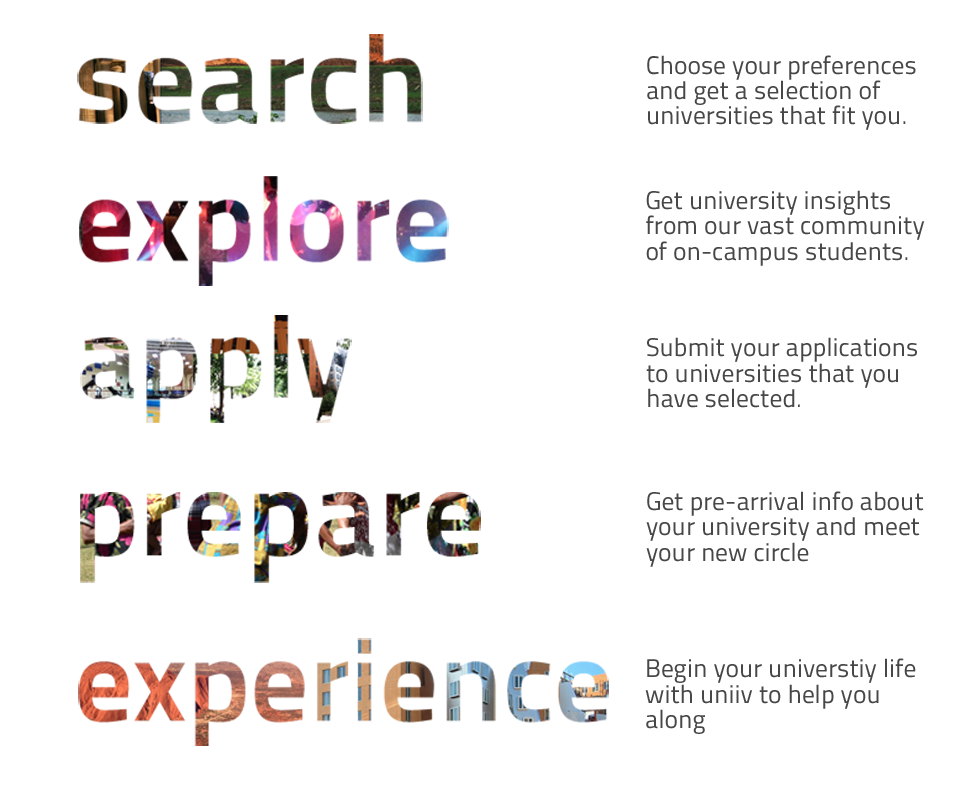
<style>
.page{position:relative;width:980px;height:792px;background:#ffffff}
.page>*{position:absolute;margin:0}
.t1{font:25.4px/25.4px "TitilliumText25L-400wt";color:#474747}
.t2{font:25.4px/21.2px "TitilliumText25L-400wt";color:#474747}
.t3{font:25.4px/23.3px "TitilliumText25L-250wt";color:#474747}
</style>
<div class="page">
<p class="t1" style="left:647px;top:55px;width:269px;height:75px">Choose your preferences <br>and get a selection of <br>universities t<span class="t2">hat fit you.</span></p>
<p class="t1" style="left:646px;top:190px;width:279px;height:76px">Get university insights <br>from our vast community<br>of on-campus students.</p>
<p class="t1" style="left:646px;top:337px;width:271px;height:71px">Submit your applications <br>to universities that you <br>have selected<span class="t3">.</span></p>
<p class="t1" style="left:646px;top:491px;width:278px;height:76px">Get pre-arrival info about your university and meet your new circle</p>
<p class="t1" style="left:645px;top:658px;width:271px;height:76px">Begin your universtiy life with uniiv to help you <br>along</p>
</div>
